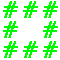
<style>
.page{position:relative;width:60px;height:60px;background:#ffffff}
.page>*{position:absolute;margin:0}
.t1{font:24px "Courier";letter-spacing:0.024em;color:#00f900}
</style>
<div class="page">
<p class="t1" style="left:3px;top:1px;width:15px;height:17px">#</p>
<p class="t1" style="left:3px;top:1px;width:15px;height:17px">#</p>
<p class="t1" style="left:3px;top:1px;width:15px;height:17px">#</p>
<p class="t1" style="left:3px;top:1px;width:15px;height:17px">#</p>
<p class="t1" style="left:3px;top:1px;width:15px;height:17px">#</p>
<p class="t1" style="left:3px;top:1px;width:15px;height:17px">#</p>
<p class="t1" style="left:3px;top:1px;width:15px;height:17px">#</p>
<p class="t1" style="left:3px;top:1px;width:15px;height:17px">#</p>
<p class="t1" style="left:3px;top:1px;width:15px;height:17px">#</p>
<p class="t1" style="left:3px;top:1px;width:15px;height:17px">#</p>
<p class="t1" style="left:3px;top:1px;width:15px;height:17px">#</p>
<p class="t1" style="left:23px;top:1px;width:15px;height:17px">#</p>
<p class="t1" style="left:23px;top:1px;width:15px;height:17px">#</p>
<p class="t1" style="left:23px;top:1px;width:15px;height:17px">#</p>
<p class="t1" style="left:23px;top:1px;width:15px;height:17px">#</p>
<p class="t1" style="left:23px;top:1px;width:15px;height:17px">#</p>
<p class="t1" style="left:23px;top:1px;width:15px;height:17px">#</p>
<p class="t1" style="left:23px;top:1px;width:15px;height:17px">#</p>
<p class="t1" style="left:23px;top:1px;width:15px;height:17px">#</p>
<p class="t1" style="left:23px;top:1px;width:15px;height:17px">#</p>
<p class="t1" style="left:23px;top:1px;width:15px;height:17px">#</p>
<p class="t1" style="left:23px;top:1px;width:15px;height:17px">#</p>
<p class="t1" style="left:43px;top:1px;width:15px;height:17px">#</p>
<p class="t1" style="left:43px;top:1px;width:15px;height:17px">#</p>
<p class="t1" style="left:43px;top:1px;width:15px;height:17px">#</p>
<p class="t1" style="left:43px;top:1px;width:15px;height:17px">#</p>
<p class="t1" style="left:43px;top:1px;width:15px;height:17px">#</p>
<p class="t1" style="left:43px;top:1px;width:15px;height:17px">#</p>
<p class="t1" style="left:43px;top:1px;width:15px;height:17px">#</p>
<p class="t1" style="left:43px;top:1px;width:15px;height:17px">#</p>
<p class="t1" style="left:43px;top:1px;width:15px;height:17px">#</p>
<p class="t1" style="left:43px;top:1px;width:15px;height:17px">#</p>
<p class="t1" style="left:43px;top:1px;width:15px;height:17px">#</p>
<p class="t1" style="left:3px;top:21px;width:15px;height:17px">#</p>
<p class="t1" style="left:3px;top:21px;width:15px;height:17px">#</p>
<p class="t1" style="left:3px;top:21px;width:15px;height:17px">#</p>
<p class="t1" style="left:3px;top:21px;width:15px;height:17px">#</p>
<p class="t1" style="left:3px;top:21px;width:15px;height:17px">#</p>
<p class="t1" style="left:3px;top:21px;width:15px;height:17px">#</p>
<p class="t1" style="left:3px;top:21px;width:15px;height:17px">#</p>
<p class="t1" style="left:3px;top:21px;width:15px;height:17px">#</p>
<p class="t1" style="left:3px;top:21px;width:15px;height:17px">#</p>
<p class="t1" style="left:3px;top:21px;width:15px;height:17px">#</p>
<p class="t1" style="left:3px;top:21px;width:15px;height:17px">#</p>
<p class="t1" style="left:43px;top:21px;width:15px;height:17px">#</p>
<p class="t1" style="left:43px;top:21px;width:15px;height:17px">#</p>
<p class="t1" style="left:43px;top:21px;width:15px;height:17px">#</p>
<p class="t1" style="left:43px;top:21px;width:15px;height:17px">#</p>
<p class="t1" style="left:43px;top:21px;width:15px;height:17px">#</p>
<p class="t1" style="left:43px;top:21px;width:15px;height:17px">#</p>
<p class="t1" style="left:43px;top:21px;width:15px;height:17px">#</p>
<p class="t1" style="left:43px;top:21px;width:15px;height:17px">#</p>
<p class="t1" style="left:43px;top:21px;width:15px;height:17px">#</p>
<p class="t1" style="left:43px;top:21px;width:15px;height:17px">#</p>
<p class="t1" style="left:43px;top:21px;width:15px;height:17px">#</p>
<p class="t1" style="left:3px;top:41px;width:15px;height:17px">#</p>
<p class="t1" style="left:3px;top:41px;width:15px;height:17px">#</p>
<p class="t1" style="left:3px;top:41px;width:15px;height:17px">#</p>
<p class="t1" style="left:3px;top:41px;width:15px;height:17px">#</p>
<p class="t1" style="left:3px;top:41px;width:15px;height:17px">#</p>
<p class="t1" style="left:3px;top:41px;width:15px;height:17px">#</p>
<p class="t1" style="left:3px;top:41px;width:15px;height:17px">#</p>
<p class="t1" style="left:3px;top:41px;width:15px;height:17px">#</p>
<p class="t1" style="left:3px;top:41px;width:15px;height:17px">#</p>
<p class="t1" style="left:3px;top:41px;width:15px;height:17px">#</p>
<p class="t1" style="left:3px;top:41px;width:15px;height:17px">#</p>
<p class="t1" style="left:23px;top:41px;width:15px;height:17px">#</p>
<p class="t1" style="left:23px;top:41px;width:15px;height:17px">#</p>
<p class="t1" style="left:23px;top:41px;width:15px;height:17px">#</p>
<p class="t1" style="left:23px;top:41px;width:15px;height:17px">#</p>
<p class="t1" style="left:23px;top:41px;width:15px;height:17px">#</p>
<p class="t1" style="left:23px;top:41px;width:15px;height:17px">#</p>
<p class="t1" style="left:23px;top:41px;width:15px;height:17px">#</p>
<p class="t1" style="left:23px;top:41px;width:15px;height:17px">#</p>
<p class="t1" style="left:23px;top:41px;width:15px;height:17px">#</p>
<p class="t1" style="left:23px;top:41px;width:15px;height:17px">#</p>
<p class="t1" style="left:23px;top:41px;width:15px;height:17px">#</p>
<p class="t1" style="left:43px;top:41px;width:15px;height:17px">#</p>
<p class="t1" style="left:43px;top:41px;width:15px;height:17px">#</p>
<p class="t1" style="left:43px;top:41px;width:15px;height:17px">#</p>
<p class="t1" style="left:43px;top:41px;width:15px;height:17px">#</p>
<p class="t1" style="left:43px;top:41px;width:15px;height:17px">#</p>
<p class="t1" style="left:43px;top:41px;width:15px;height:17px">#</p>
<p class="t1" style="left:43px;top:41px;width:15px;height:17px">#</p>
<p class="t1" style="left:43px;top:41px;width:15px;height:17px">#</p>
<p class="t1" style="left:43px;top:41px;width:15px;height:17px">#</p>
<p class="t1" style="left:43px;top:41px;width:15px;height:17px">#</p>
<p class="t1" style="left:43px;top:41px;width:15px;height:17px">#</p>
</div>
